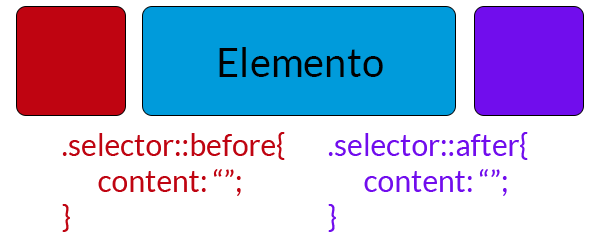
<style>
.page{position:relative;width:600px;height:250px;background:#ffffff}
.page>*{position:absolute;margin:0}
.t1{font:40px "Lato-Regular";color:#000000}
.t2{font:30px "Lato-Regular";color:#bf0411}
.t3{font:30px "Lato-Regular";color:#710ded}
</style>
<div class="page">
<p class="t1" style="left:219px;top:47px;width:164px;height:30px">Elemento</p>
<p class="t2" style="left:62px;top:132px;width:223px;height:100px">.selector::before{<br> content: “”;<br>}</p>
<p class="t3" style="left:328px;top:132px;width:200px;height:100px">.selector::after{<br> content: “”;<br>}</p>
</div>
